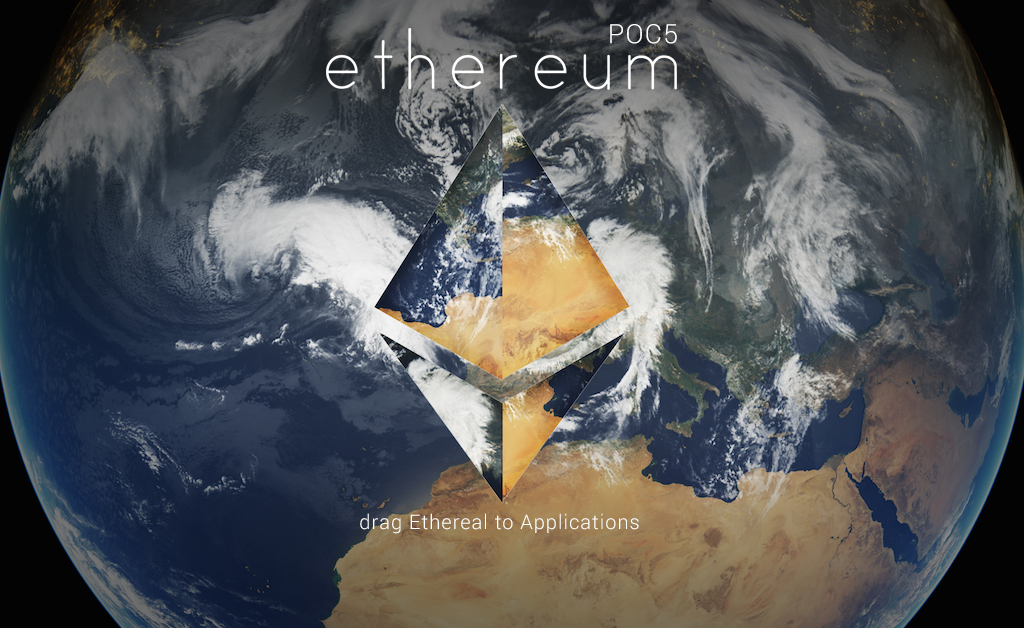
<style>
.page{position:relative;width:1024px;height:628px}
.page>*{position:absolute;margin:0}
.t1{font:26.7px "Roboto-Light";letter-spacing:0.05em;color:#ffffff}
.t2{font:20px "Roboto-Light";letter-spacing:0.05em;color:#ffffff}
</style>
<div class="page">
<p class="t1" style="left:610px;top:24px;width:67px;height:20px">POC5</p>
<p class="t2" style="left:360px;top:513px;width:279px;height:21px">drag Ethereal to Applications</p>
</div>
